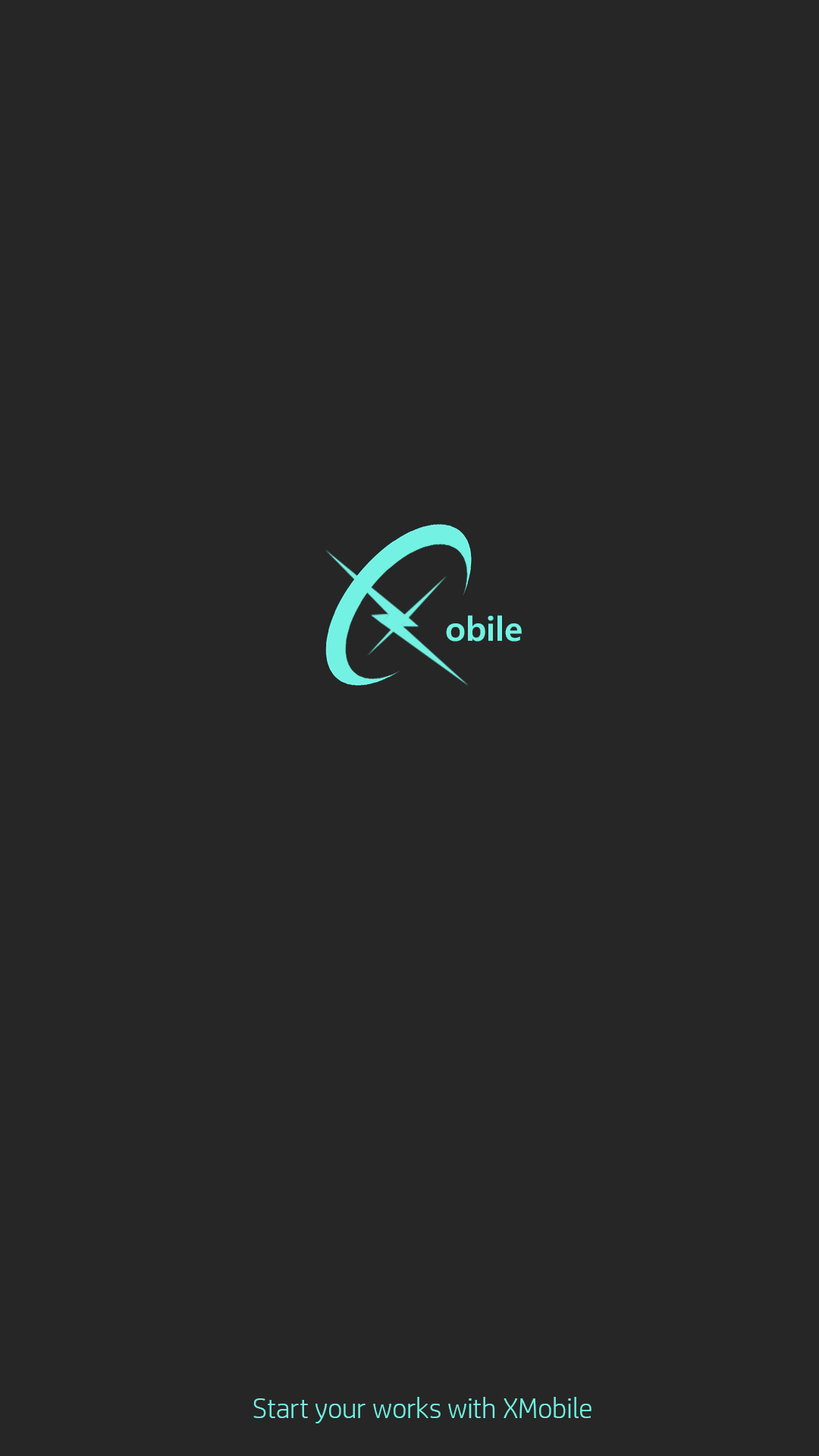
<style>
.page{position:relative;width:819px;height:1456px;background:#262626}
.page>*{position:absolute;margin:0}
.t1{font:33.2px "MalgunGothicBold";color:#73f1e2}
.t2{font:28.4px "HPSimplified-Light";color:#73f1e2}
</style>
<div class="page">
<p class="t1" style="left:446px;top:615px;width:76px;height:27px">obile</p>
<p class="t2" style="left:253px;top:1397px;width:338px;height:26px">Start your works with XMobile</p>
</div>
